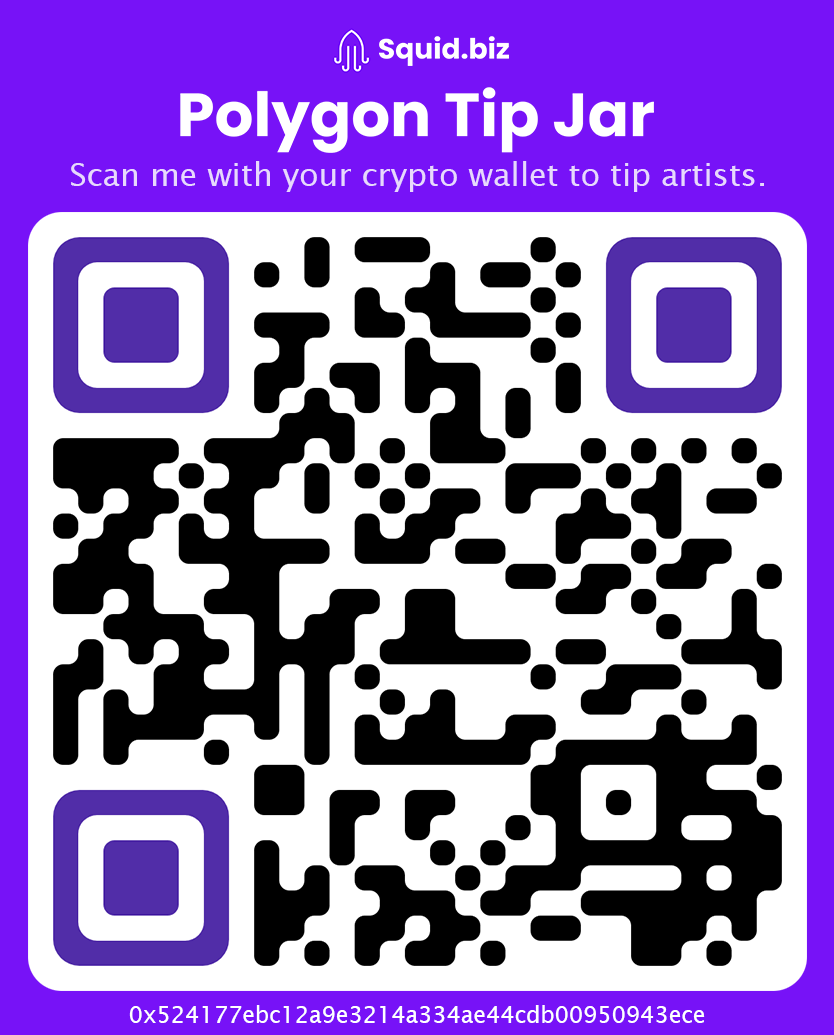
<style>
.page{position:relative;width:834px;height:1035px;background:#ffffff}
.page>*{position:absolute;margin:0}
.t1{font:31.8px "LucidaSans";color:#e8d8fc}
.t2{font:22.6px "LucidaSans";color:#ffffff}
</style>
<div class="page">
<p class="t1" style="left:71px;top:161px;width:693px;height:31px">Scan me with your crypto wallet to tip artists.</p>
<p class="t2" style="left:129px;top:1005px;width:576px;height:18px">0x524177ebc12a9e3214a334ae44cdb00950943ece</p>
</div>
